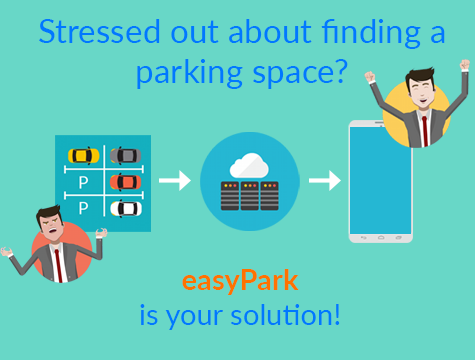
<style>
.page{position:relative;width:475px;height:360px;background:#68d7c7}
.page>*{position:absolute;margin:0}
.t1{font:33.3px "Lato-Regular";color:#0078ff}
.t2{font:29.2px "Lato-Regular";color:#0078ff}
.t3{font:29.2px "Lato-Bold";color:#ff7200}
</style>
<div class="page">
<p class="t1" style="left:39px;top:19px;width:406px;height:70px;text-align:center">Stressed out about finding a<br>parking space?</p>
<p class="t2" style="left:140px;top:269px;width:200px;height:61px;text-align:center"><span class="t3">easyPark<br></span>is your solution!</p>
</div>
